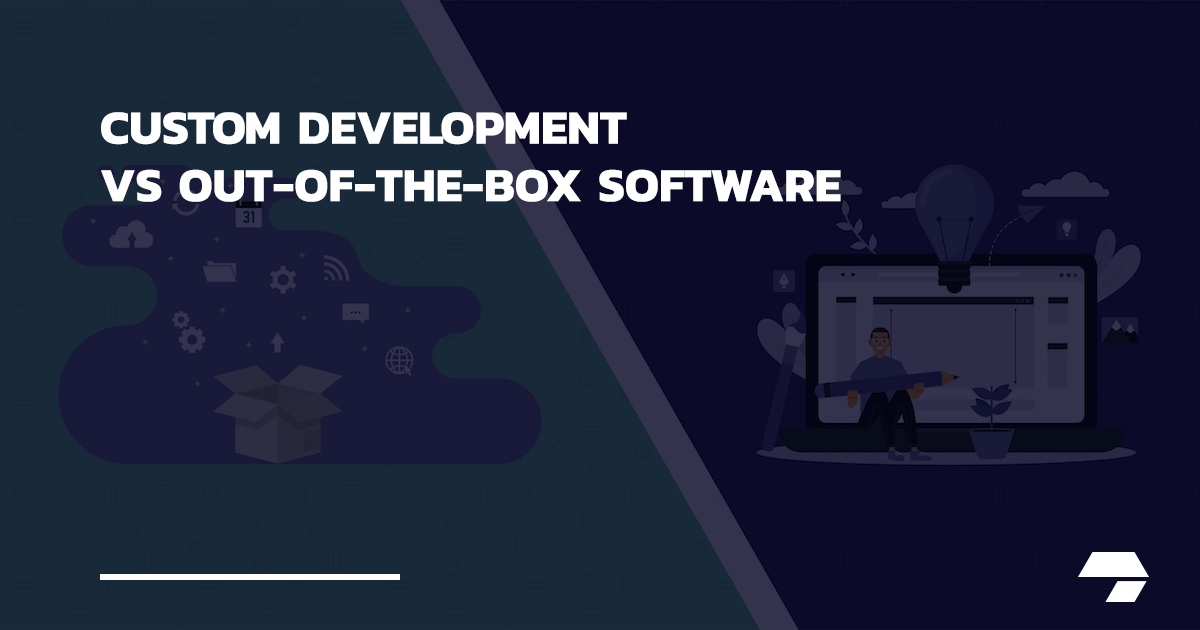
<style>
.page{position:relative;width:1200px;height:630px;background:#0b0a29}
.page>*{position:absolute;margin:0}
.t1{font:48px "Kanit-Bold";color:#ffffff;text-transform:uppercase}
</style>
<div class="page">
<p class="t1" style="left:101px;top:112px;width:740px;height:90px">Custom development<br>vs out-of-the-box software</p>
</div>
